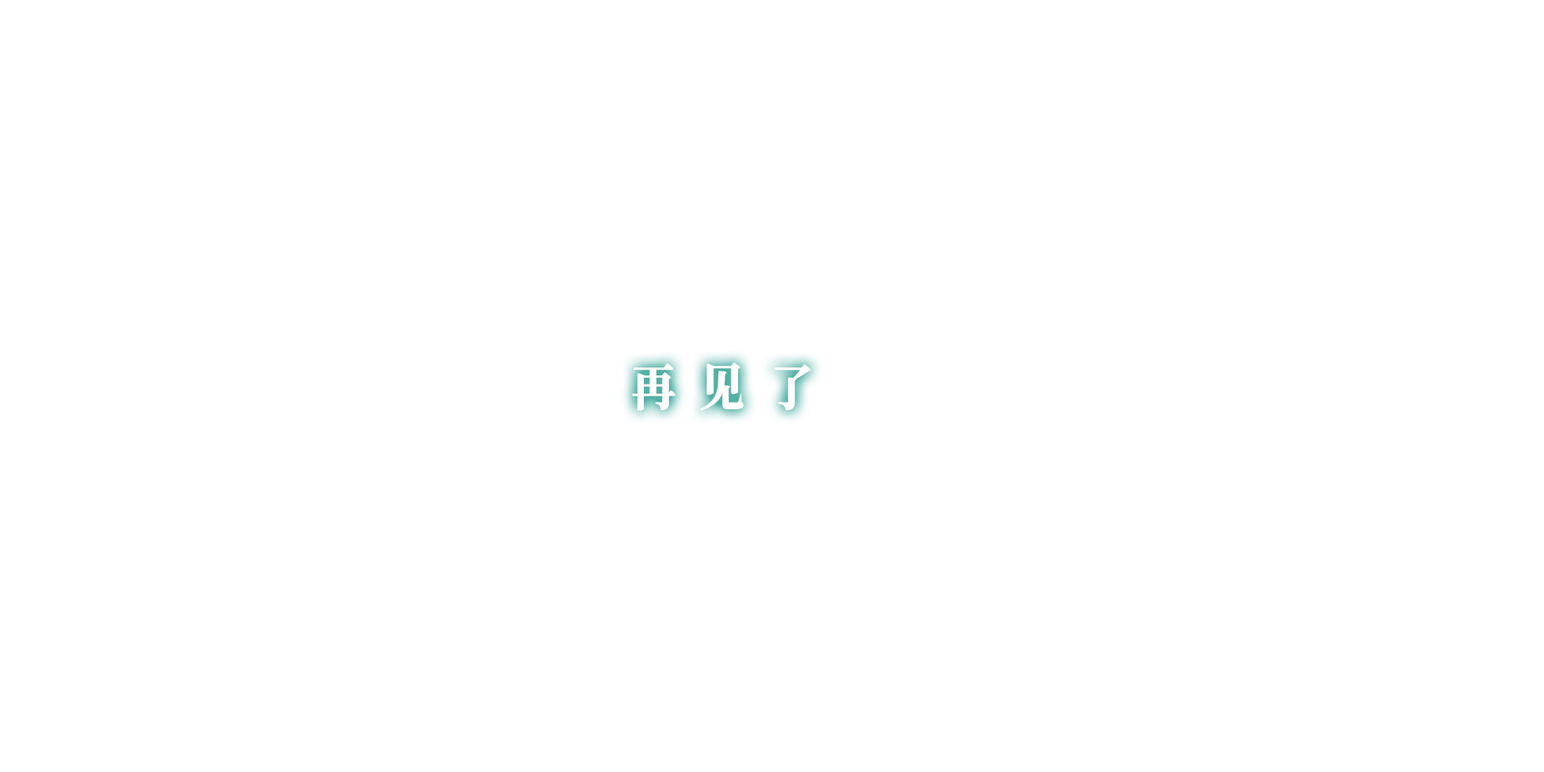
<style>
.page{position:relative;width:1544px;height:772px;background:#ffffff}
.page>*{position:absolute;margin:0}
.t1{font:49.8px "ChillJinshuSongHeavy";letter-spacing:0.14em;color:#ffffff;scale:0.9 1}
</style>
<div class="page">
<p class="t1" style="left:632px;top:363px;width:179px;height:48px">再 见 了</p>
</div>
